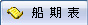
<style>
.page{position:relative;width:88px;height:25px}
.page>*{position:absolute;margin:0}
.t1{font:12px "SimSun";color:#000103}
</style>
<div class="page">
<p class="t1" style="left:32px;top:7px;width:47px;height:11px">船 期 表</p>
</div>
